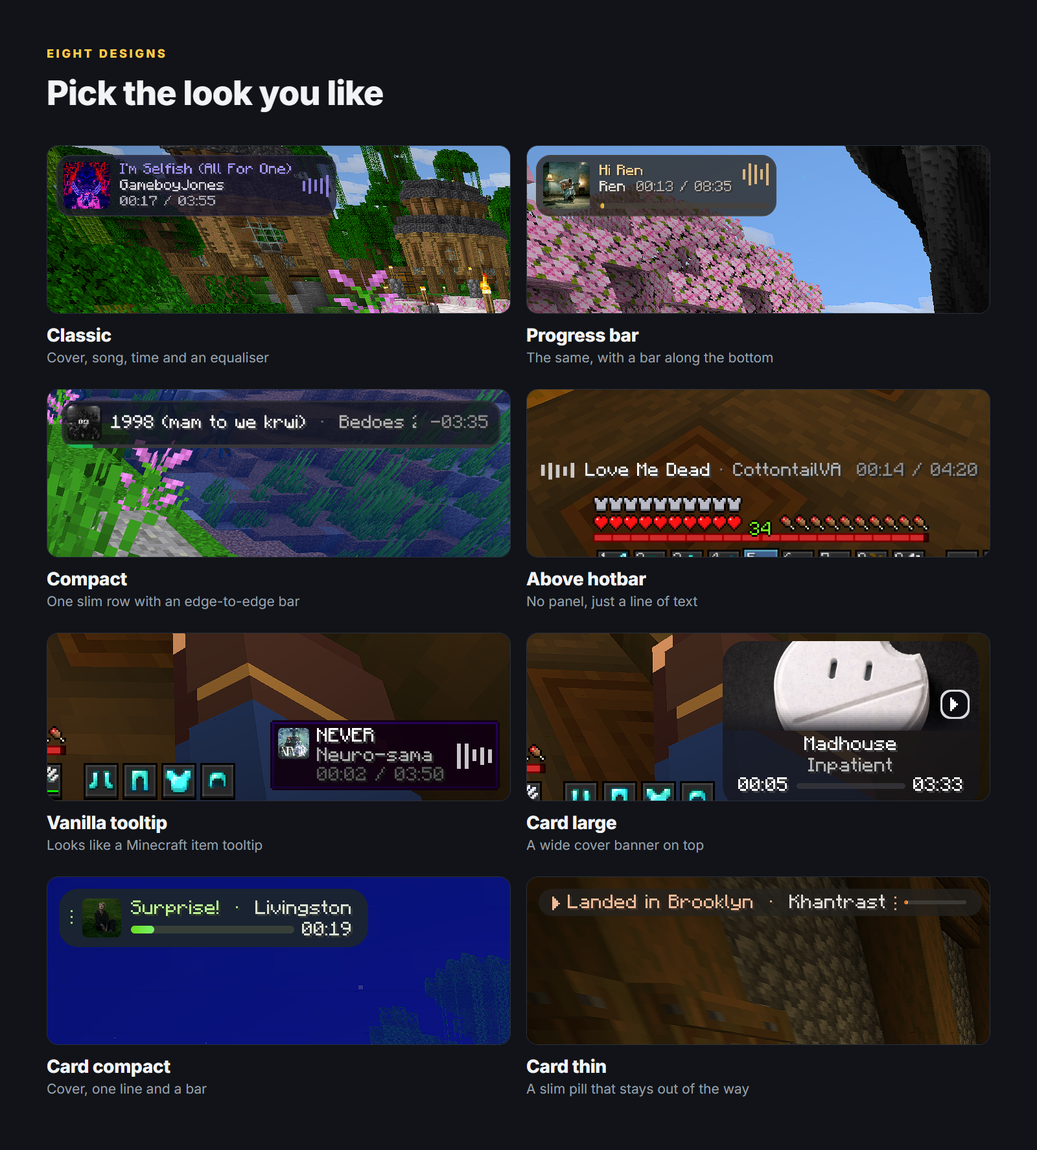
<style>
.page{position:relative;width:1037px;height:1150px;background:#111318}
.page>*{position:absolute;margin:0}
.t1{font:11.7px "Inter-ExtraBold";letter-spacing:0.2em;color:#ffcc4d}
.t2{font:33.7px "Inter-ExtraBold";letter-spacing:-0.015em;color:#f2f3f5}
.t3{font:18.1px "Inter-ExtraBold";letter-spacing:-0.011em;color:#f2f3f5}
.t4{font:13.6px "Inter-Regular";color:#9aa0ab}
</style>
<div class="page">
<p class="t1" style="left:47px;top:49px;width:118px;height:9px">EIGHT DESIGNS</p>
<p class="t2" style="left:48px;top:78px;width:335px;height:34px">Pick the look you like</p>
<p class="t3" style="left:47px;top:327px;width:64px;height:15px">Classic</p>
<p class="t3" style="left:527px;top:328px;width:112px;height:17px">Progress bar</p>
<p class="t4" style="left:47px;top:352px;width:222px;height:14px">Cover, song, time and an equaliser</p>
<p class="t4" style="left:526px;top:352px;width:247px;height:14px">The same, with a bar along the bottom</p>
<p class="t3" style="left:47px;top:572px;width:80px;height:17px">Compact</p>
<p class="t3" style="left:526px;top:572px;width:120px;height:14px">Above hotbar</p>
<p class="t4" style="left:47px;top:596px;width:253px;height:13px">One slim row with an edge-to-edge bar</p>
<p class="t4" style="left:527px;top:596px;width:171px;height:13px">No panel, just a line of text</p>
<p class="t3" style="left:47px;top:815px;width:120px;height:18px">Vanilla tooltip</p>
<p class="t3" style="left:526px;top:815px;width:90px;height:18px">Card large</p>
<p class="t4" style="left:47px;top:839px;width:216px;height:14px">Looks like a Minecraft item tooltip</p>
<p class="t4" style="left:526px;top:839px;width:178px;height:14px">A wide cover banner on top</p>
<p class="t3" style="left:47px;top:1059px;width:123px;height:18px">Card compact</p>
<p class="t3" style="left:526px;top:1058px;width:80px;height:15px">Card thin</p>
<p class="t4" style="left:47px;top:1083px;width:160px;height:13px">Cover, one line and a bar</p>
<p class="t4" style="left:526px;top:1083px;width:223px;height:14px">A slim pill that stays out of the way</p>
</div>
